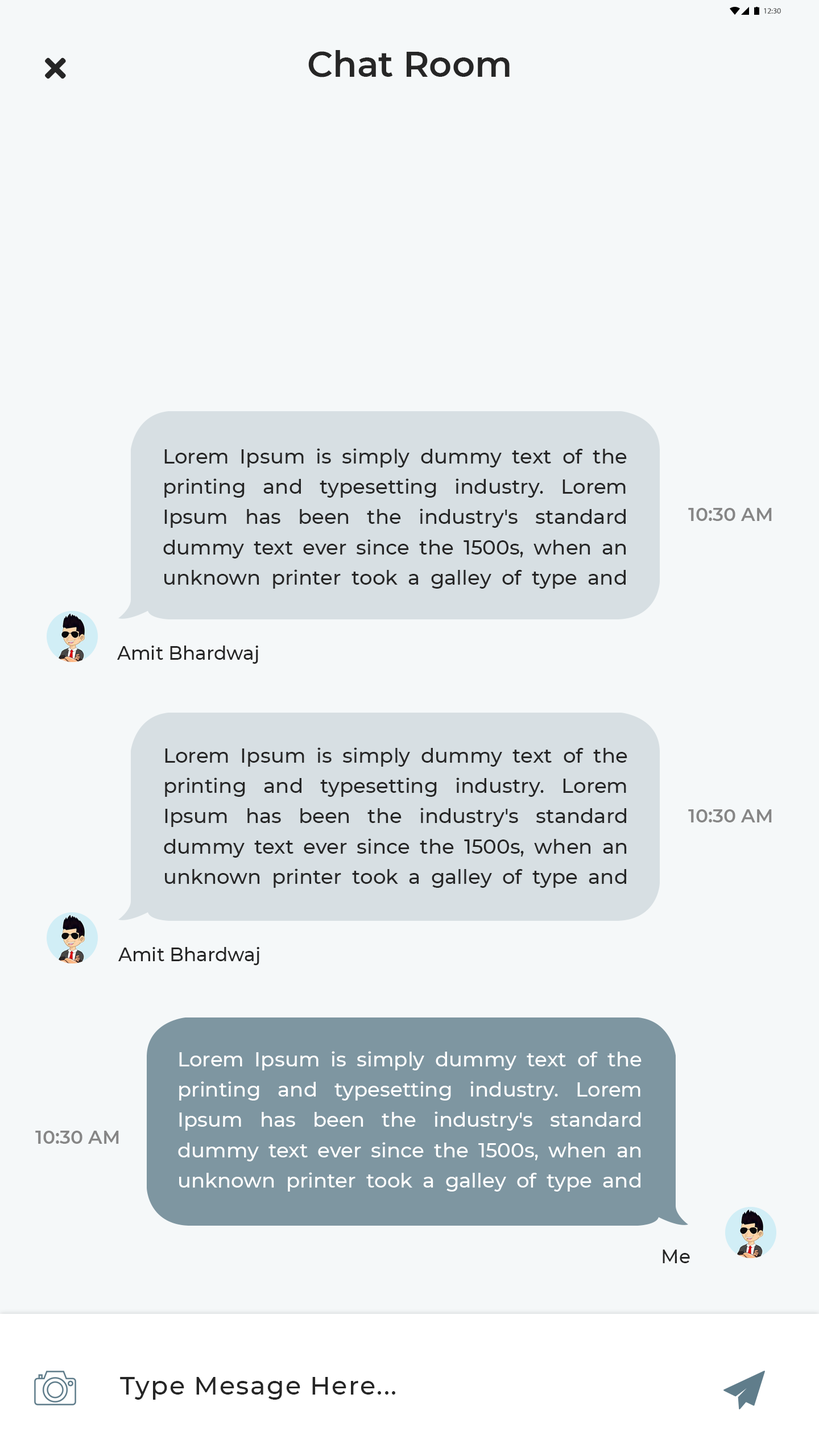
<style>
.page{position:relative;width:819px;height:1456px;background:#f5f8f9}
.page>*{position:absolute;margin:0}
.t1{font:8px "MyriadPro-Regular";color:#181818}
.t2{font:35.4px "Montserrat-SemiBold";color:#262626}
.t3{font:20.2px/30.3px "Montserrat-Medium";color:#262626}
.t4{font:18.7px "Montserrat-SemiBold";color:#868686}
.t5{font:18.7px "Montserrat-Medium";color:#262626}
.t6{font:20.2px/30.3px "Montserrat-Medium";color:#ffffff}
.t7{font:25.3px "Montserrat-Medium";letter-spacing:0.05em;color:#262626}
</style>
<div class="page">
<p class="t1" style="left:764px;top:8px;width:17px;height:6px">12:30</p>
<p class="t2" style="left:308px;top:50px;width:202px;height:27px">Chat Room</p>
<p class="t3" style="left:163px;top:448px;width:464px;height:141px;text-align:justify">Lorem Ipsum is simply dummy text of the printing and typesetting industry. Lorem Ipsum has been the industry's standard dummy text ever since the 1500s, when an unknown printer took a galley of type and scrambled it to make a type specimen book.</p>
<p class="t4" style="left:688px;top:508px;width:84px;height:13px">10:30 AM</p>
<p class="t5" style="left:117px;top:646px;width:141px;height:18px">Amit Bhardwaj</p>
<p class="t3" style="left:164px;top:747px;width:463px;height:141px;text-align:justify">Lorem Ipsum is simply dummy text of the printing and typesetting industry. Lorem Ipsum has been the industry's standard dummy text ever since the 1500s, when an unknown printer took a galley of type and scrambled it to make a type specimen book.</p>
<p class="t4" style="left:688px;top:809px;width:84px;height:13px">10:30 AM</p>
<p class="t5" style="left:118px;top:947px;width:141px;height:18px">Amit Bhardwaj</p>
<p class="t6" style="left:178px;top:1051px;width:464px;height:141px;text-align:justify">Lorem Ipsum is simply dummy text of the printing and typesetting industry. Lorem Ipsum has been the industry's standard dummy text ever since the 1500s, when an unknown printer took a galley of type and scrambled it to make a type specimen book.</p>
<p class="t4" style="left:35px;top:1131px;width:84px;height:13px">10:30 AM</p>
<p class="t5" style="left:663px;top:1250px;width:27px;height:13px">Me</p>
<p class="t7" style="left:120px;top:1377px;width:275px;height:23px">Type Mesage Here...</p>
</div>
